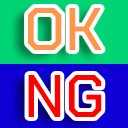
<style>
.page{position:relative;width:128px;height:128px}
.page>*{position:absolute;margin:0}
.t1{font:60px "ChakraPetch-Medium";color:#ff964c}
.t2{font:60px "ChakraPetch-Medium";color:#ff0000}
</style>
<div class="page">
<p class="t1" style="left:28px;top:8px;width:74px;height:42px">OK</p>
<p class="t2" style="left:28px;top:75px;width:74px;height:42px">NG</p>
</div>
